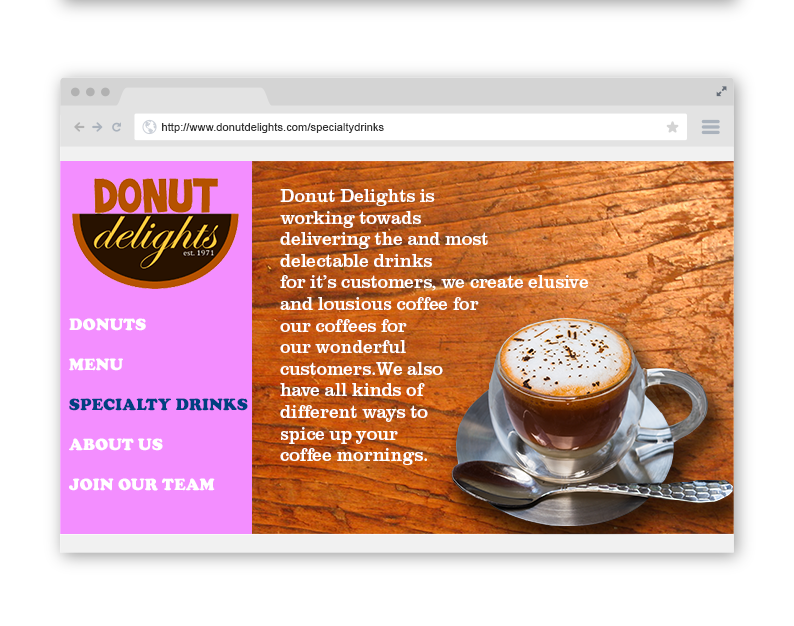
<style>
.page{position:relative;width:794px;height:626px;background:#ffffff}
.page>*{position:absolute;margin:0}
.t1{font:11.2px "ArialMT";color:#333333}
.t2{font:18px "ClarendonURW-Reg";color:#ffffff}
.t3{font:16.9px/40px "CooperBlack";color:#ffffff}
.t4{font:16.9px/40px "CooperBlack";color:#004081}
</style>
<div class="page">
<p class="t1" style="left:162px;top:123px;width:222px;height:10px">http://www.donutdelights.com/specialtydrinks</p>
<p class="t2" style="left:280px;top:189px;width:308px;height:276px">Donut Delights is<br>working towads<br>delivering the and most<br>delectable drinks<br>for it’s customers, we create elusive<br>and lousious coffee for<br>our coffees for<br>our wonderful<br>customers.We also<br>have all kinds of<br>different ways to<br>spice up your<br>coffee mornings.</p>
<p class="t3" style="left:69px;top:318px;width:179px;height:173px">DONUTS <br>MENU<br><span class="t4">SPECIALTY DRINKS<br></span>ABOUT US<br>JOIN OUR TEAM</p>
</div>
